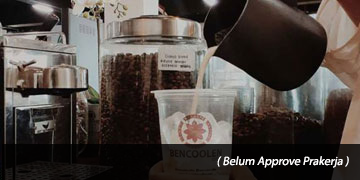
<style>
.page{position:relative;width:360px;height:180px}
.page>*{position:absolute;margin:0}
.t1{font:12px "MyriadPro-Regular";color:#fffefe;font-style:italic}
</style>
<div class="page">
<p class="t1" style="left:217px;top:156px;width:132px;height:12px">( Belum Approve Prakerja )</p>
</div>
